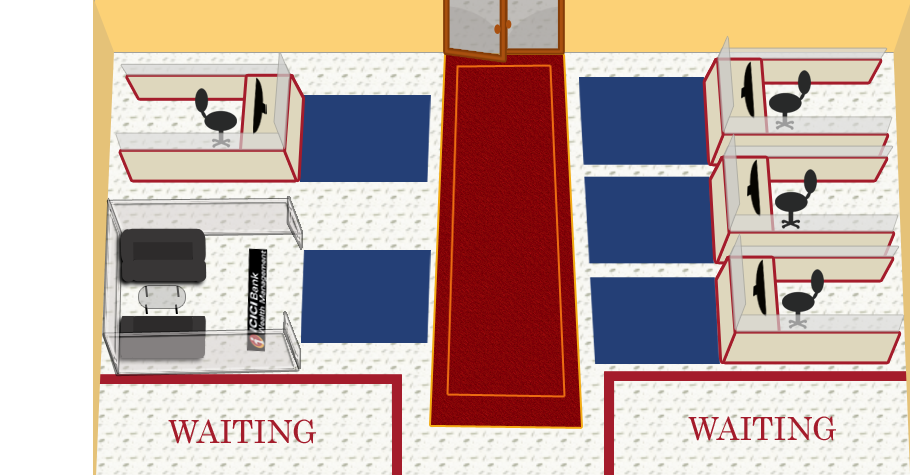
<style>
.page{position:relative;width:910px;height:475px}
.page>*{position:absolute;margin:0}
.t1{font:31.8px "Century";color:#a41c2b}
</style>
<div class="page">
<p class="t1" style="left:168px;top:419px;width:148px;height:25px">WAITING</p>
<p class="t1" style="left:688px;top:416px;width:148px;height:25px">WAITING</p>
</div>
